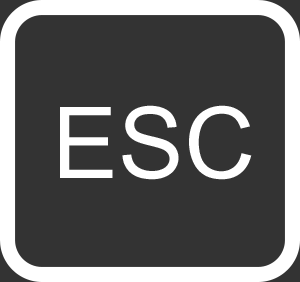
<style>
.page{position:relative;width:300px;height:282px;background:#333333}
.page>*{position:absolute;margin:0}
.t1{font:98.9px "ArialMT";color:#ffffff}
</style>
<div class="page">
<p class="t1" style="left:60px;top:105px;width:192px;height:75px">ESC</p>
</div>
